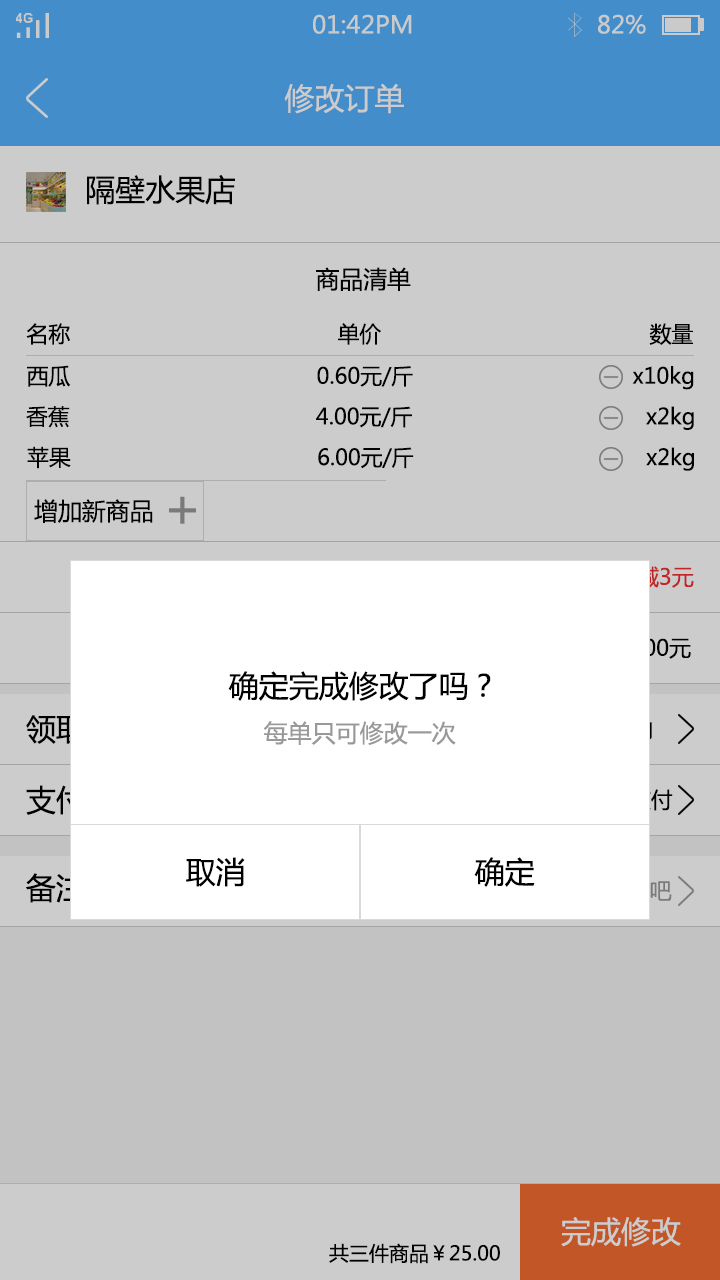
<style>
.page{position:relative;width:720px;height:1280px;background:#cccccc}
.page>*{position:absolute;margin:0}
.t1{font:24px "MicrosoftYaHei";color:#c9caca}
.t2{font:30px "MicrosoftYaHei";color:#cccbcb}
.t3{font:30px "MicrosoftYaHei";color:#030303}
.t4{font:24px "MicrosoftYaHei";color:#030303}
.t5{font:22px "MicrosoftYaHei";color:#030303}
.t6{font:54px "MicrosoftYaHei";color:#7a7a7a}
.t7{font:24.2px "MicrosoftYaHei";color:#010101}
.t8{font:22px "MicrosoftYaHei"}
.t9{font:30px "MicrosoftYaHei";color:#000000}
.t10{font:30px "MicrosoftYaHei"}
.t11{font:24px "MicrosoftYaHei";color:#999999}
.t12{font:30px "MicrosoftYaHei";color:#cccccc}
.t13{font:20px "MicrosoftYaHei";color:#000000}
</style>
<div class="page">
<p class="t1" style="left:313px;top:14px;width:99px;height:20px">01:42PM</p>
<p class="t1" style="left:598px;top:14px;width:48px;height:20px">82%</p>
<p class="t2" style="left:284px;top:83px;width:120px;height:31px">修改订单</p>
<p class="t3" style="left:87px;top:175px;width:148px;height:30px">隔壁水果店</p>
<p class="t4" style="left:316px;top:267px;width:95px;height:24px">商品清单</p>
<p class="t5" style="left:26px;top:323px;width:44px;height:22px">名称</p>
<p class="t5" style="left:338px;top:323px;width:43px;height:22px">单价</p>
<p class="t5" style="left:649px;top:323px;width:44px;height:22px">数量</p>
<p class="t5" style="left:27px;top:365px;width:44px;height:22px">西瓜</p>
<p class="t5" style="left:317px;top:366px;width:96px;height:21px">0.60元/斤</p>
<p class="t5" style="left:632px;top:366px;width:62px;height:24px">x10kg</p>
<p class="t5" style="left:26px;top:406px;width:44px;height:22px">香蕉</p>
<p class="t5" style="left:316px;top:406px;width:96px;height:22px">4.00元/斤</p>
<p class="t5" style="left:646px;top:406px;width:48px;height:24px">x2kg</p>
<p class="t5" style="left:27px;top:446px;width:44px;height:23px">苹果</p>
<p class="t5" style="left:318px;top:447px;width:96px;height:22px">6.00元/斤</p>
<p class="t5" style="left:646px;top:447px;width:48px;height:24px">x2kg</p>
<p class="t6" style="left:169px;top:496px;width:27px;height:28px">+</p>
<p class="t7" style="left:34px;top:499px;width:119px;height:24px">增加新商品</p>
<p class="t8" style="left:616px;top:566px;width:78px;height:22px">已减3元</p>
<p class="t9" style="left:228px;top:671px;width:263px;height:30px">确定完成修改了吗？</p>
<p class="t10" style="left:26px;top:714px;width:119px;height:30px">领取时间</p>
<p class="t11" style="left:264px;top:721px;width:192px;height:24px">每单只可修改一次</p>
<p class="t10" style="left:26px;top:785px;width:120px;height:30px">支付方式</p>
<p class="t9" style="left:186px;top:857px;width:59px;height:30px">取消</p>
<p class="t9" style="left:474px;top:857px;width:61px;height:30px">确定</p>
<p class="t10" style="left:26px;top:873px;width:132px;height:30px">备注/发票</p>
<p class="t12" style="left:561px;top:1217px;width:120px;height:30px">完成修改</p>
<p class="t13" style="left:329px;top:1243px;width:171px;height:21px">共三件商品￥25.00</p>
</div>
